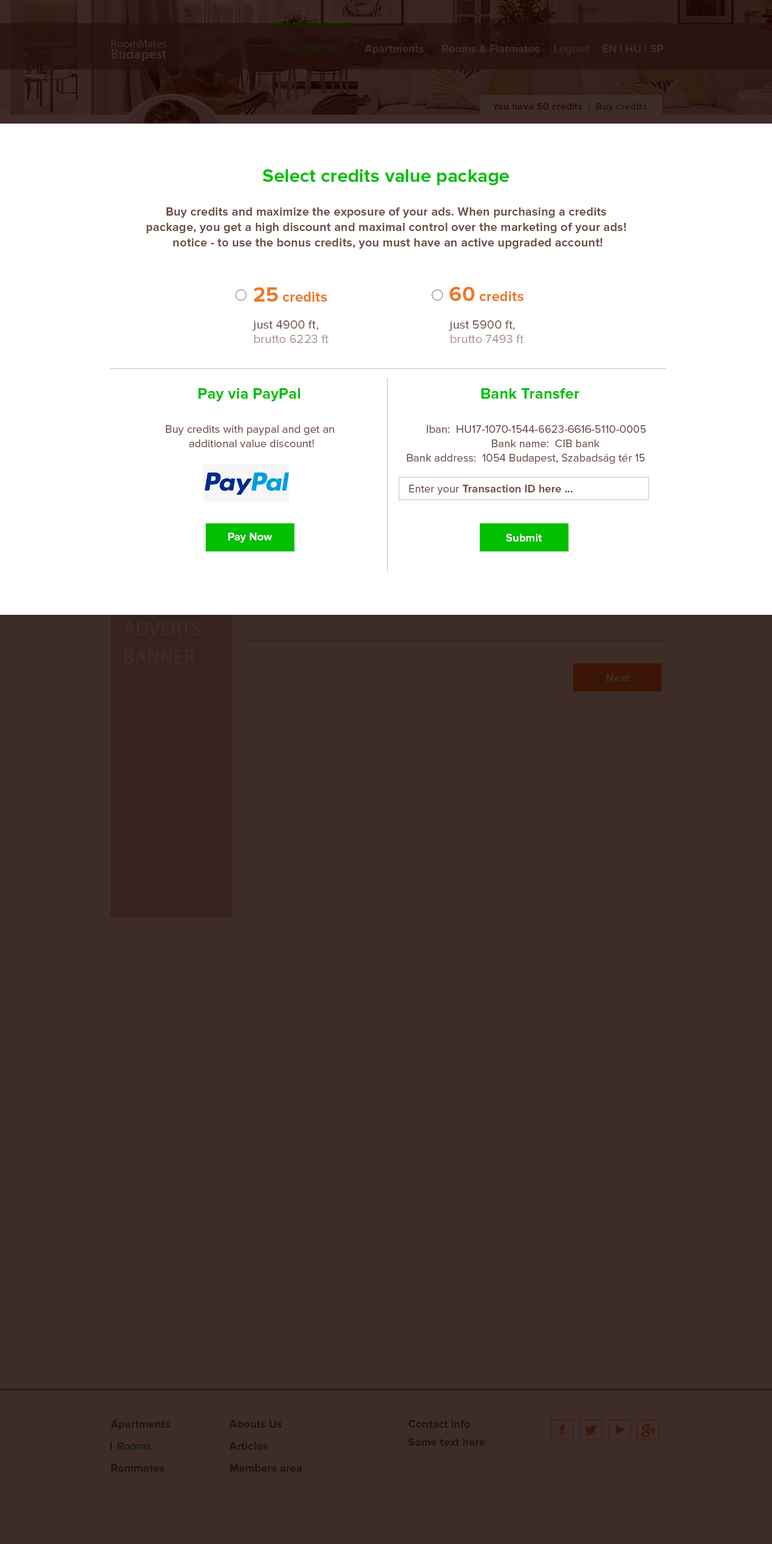
<style>
.page{position:relative;width:772px;height:1544px;background:#3e2c29}
.page>*{position:absolute;margin:0}
.t1{font:18.8px "ProximaNova-Bold";letter-spacing:0.01em;color:#00be00}
.t2{font:12.1px/15.4px "ProximaNova-Bold";letter-spacing:0.01em;color:#6f504a}
.t3{font:14.3px "ProximaNova-Bold";letter-spacing:0.01em;color:#ee7829}
.t4{font:21px "ProximaNova-Bold";letter-spacing:0.01em;color:#ee7829}
.t5{font:12.1px/14.3px "ProximaNova-Regular";letter-spacing:0.01em;color:#ab9592}
.t6{font:12.1px/14.3px "ProximaNova-Regular";letter-spacing:0.01em;color:#6f504a}
.t7{font:15.4px "ProximaNova-Bold";letter-spacing:0.01em;color:#00be00}
.t8{font:11px/14.3px "ProximaNova-Regular";letter-spacing:0.01em;color:#6f504a}
.t9{font:11px "ProximaNova-Bold";letter-spacing:0.01em;color:#6e5049}
.t10{font:11px "ProximaNova-Regular";letter-spacing:0.01em;color:#6e5049}
.t11{font:11px "ProximaNova-Bold";letter-spacing:0.01em;color:#ffffff}
</style>
<div class="page">
<p class="t1" style="left:263px;top:169px;width:246px;height:16px">Select credits value package</p>
<p class="t2" style="left:147px;top:207px;width:479px;height:42px;text-align:center">Buy credits and maximize the exposure of your ads. When purchasing a credits <br>package, you get a high discount and maximal control over the marketing of your ads! <br>notice - to use the bonus credits, you must have an active upgraded account!</p>
<p class="t3" style="left:254px;top:287px;width:73px;height:15px"><span class="t4">25</span> credits</p>
<p class="t3" style="left:450px;top:287px;width:74px;height:14px"><span class="t4">60</span> credits</p>
<p class="t5" style="left:252px;top:320px;width:77px;height:23px"><span class="t6">just 4900 ft, <br></span>brutto 6223 ft</p>
<p class="t5" style="left:448px;top:320px;width:76px;height:23px"><span class="t6">just 5900 ft, <br></span>brutto 7493 ft</p>
<p class="t7" style="left:199px;top:388px;width:101px;height:14px">Pay via PayPal</p>
<p class="t7" style="left:481px;top:388px;width:99px;height:11px">Bank Transfer</p>
<p class="t8" style="left:166px;top:425px;width:168px;height:22px;text-align:center">Buy credits with paypal and get an <br>additional value discount!</p>
<p class="t8" style="left:407px;top:425px;width:239px;height:39px;text-align:center">Iban:  HU17-1070-1544-6623-6616-5110-0005 <br>Bank name:  CIB bank<br>Bank address:  1054 Budapest, Szabadság tér 15</p>
<p class="t9" style="left:409px;top:485px;width:164px;height:10px"><span class="t10">Enter your</span> Transaction ID here ...</p>
<p class="t11" style="left:228px;top:533px;width:44px;height:10px">Pay Now</p>
<p class="t11" style="left:506px;top:534px;width:36px;height:8px">Submit</p>
</div>
